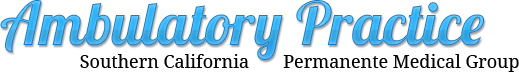
<style>
.page{position:relative;width:519px;height:72px;background:#ffffff}
.page>*{position:absolute;margin:0}
.t1{font:60px "Lobster"}
.t2{font:18px "DroidSerif";color:#000000}
</style>
<div class="page">
<p class="t1" style="left:0px;top:0px;width:484px;height:60px">Ambulatory Practice</p>
<p class="t2" style="left:80px;top:54px;width:169px;height:14px">Southern California</p>
<p class="t2" style="left:283px;top:54px;width:236px;height:18px">Permanente Medical Group</p>
</div>
